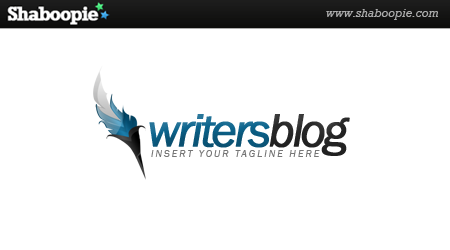
<style>
.page{position:relative;width:450px;height:250px;background:#ffffff}
.page>*{position:absolute;margin:0}
.t1{font:48px "FranklinGothic-BookItalic";letter-spacing:-0.075em;color:#0c648d;font-weight:bold}
.t2{font:48px "FranklinGothic-BookItalic";letter-spacing:-0.075em;color:#282828;font-weight:bold}
.t3{font:10px "FranklinGothic-BookItalic";letter-spacing:0.2em;color:#767676}
</style>
<div class="page">
<p class="t1" style="left:149px;top:114px;width:201px;height:42px">writers<span class="t2">blog</span></p>
<p class="t3" style="left:151px;top:150px;width:169px;height:7px">INSERT YOUR TAGLINE HERE</p>
</div>
